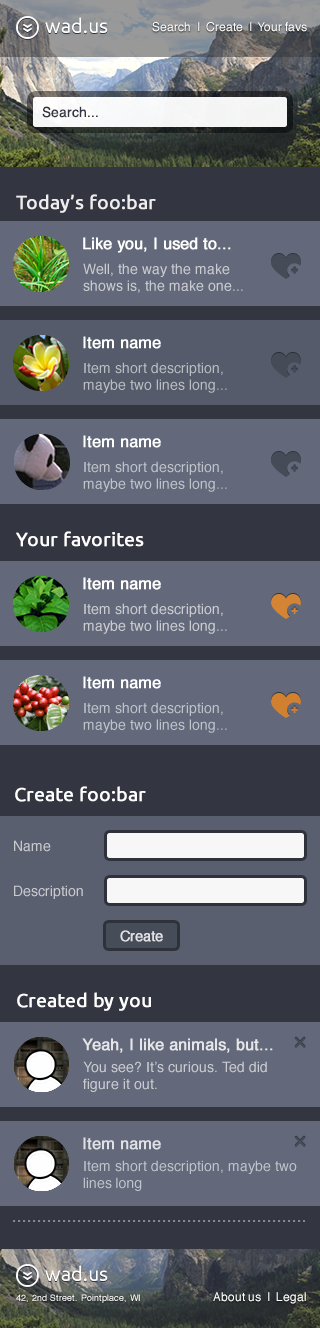
<style>
.page{position:relative;width:320px;height:1328px;background:#63697b}
.page>*{position:absolute;margin:0}
.t1{font:12px "Helvetica";color:#ffffff}
.t2{font:14px "Helvetica";color:#333640}
.t3{font:19px "Ubuntu";color:#eeeeee;font-weight:bold}
.t4{font:16px "Helvetica";color:#ffffff;font-weight:bold}
.t5{font:14px/16.8px "Helvetica";color:#caccd1}
.t6{font:19px "Ubuntu";color:#ffffff;font-weight:bold}
.t7{font:14px "Helvetica";color:#c8c9cd}
.t8{font:14px "Helvetica";color:#e2e3e4;font-weight:bold}
.t9{font:16px "Helvetica";color:#e5e6e9;font-weight:bold}
.t10{font:9px "Helvetica";color:#ffffff}
</style>
<div class="page">
<p class="t1" style="left:152px;top:22px;width:155px;height:10px">Search  |  Create  |  Your favs</p>
<p class="t2" style="left:42px;top:106px;width:56px;height:12px">Search...</p>
<p class="t3" style="left:16px;top:194px;width:140px;height:19px">Today’s foo:bar</p>
<p class="t4" style="left:83px;top:237px;width:148px;height:16px">Like you, I used to...</p>
<p class="t5" style="left:83px;top:263px;width:160px;height:30px">Well, the way the make<br>shows is, the make one...</p>
<p class="t6" style="left:16px;top:531px;width:128px;height:16px">Your favorites</p>
<p class="t4" style="left:83px;top:577px;width:78px;height:13px">Item name</p>
<p class="t5" style="left:83px;top:603px;width:144px;height:31px">Item short description,<br>maybe two lines long...</p>
<p class="t6" style="left:15px;top:786px;width:131px;height:16px">Create foo:bar</p>
<p class="t7" style="left:14px;top:840px;width:37px;height:12px">Name</p>
<p class="t7" style="left:14px;top:885px;width:69px;height:14px">Description</p>
<p class="t8" style="left:120px;top:930px;width:43px;height:12px">Create</p>
<p class="t6" style="left:17px;top:992px;width:134px;height:19px">Created by you</p>
<p class="t9" style="left:82px;top:1038px;width:191px;height:15px">Yeah, I like animals, but...</p>
<p class="t5" style="left:83px;top:1061px;width:184px;height:31px">You see? It’s curious. Ted did figure it out.</p>
<p class="t10" style="left:16px;top:1294px;width:124px;height:9px">42, 2nd Street. Pointplace, WI</p>
<p class="t1" style="left:213px;top:1292px;width:93px;height:12px">About us  |  Legal</p>
</div>
